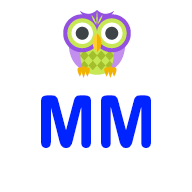
<style>
.page{position:relative;width:192px;height:192px;background:#ffffff}
.page>*{position:absolute;margin:0}
.t1{font:72px "ArialRoundedMTBold";color:#0024ff}
</style>
<div class="page">
<p class="t1" style="left:41px;top:95px;width:110px;height:53px">MM</p>
</div>
